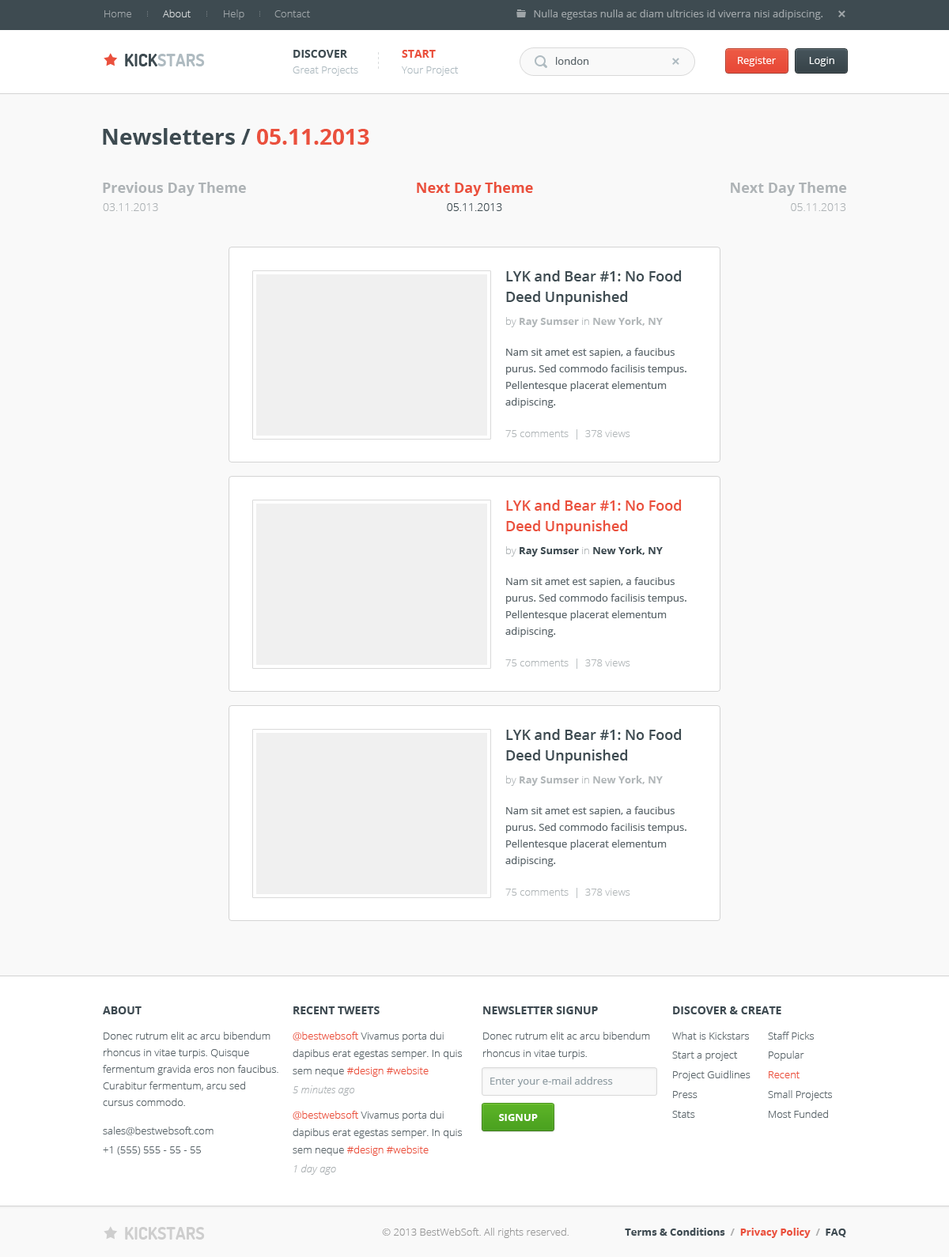
<style>
.page{position:relative;width:949px;height:1257px;background:#f9f9f9}
.page>*{position:absolute;margin:0}
.t1{font:10.3px "OpenSans-Light";color:#9fa5a8}
.t2{font:10.3px "OpenSans-Light";color:#d8dbdc}
.t3{font:10.3px "OpenSans";color:#9fa5a8}
.t4{font:17.4px "Dosis-Bold";color:#afbbc1;text-transform:uppercase}
.t5{font:17.4px "Dosis-Bold";color:#3e4b51;text-transform:uppercase}
.t6{font:11.1px "OpenSans-Bold";color:#3e4b51;text-transform:uppercase}
.t7{font:11.1px "OpenSans-Bold";color:#ea503d;text-transform:uppercase}
.t8{font:10.3px "OpenSans";color:#5c666b}
.t9{font:10.3px "OpenSans";color:#ffffff}
.t10{font:10.3px "OpenSans-Light";color:#afbbc1}
.t11{font:22.1px "OpenSans-Bold";color:#3e4b51}
.t12{font:22.1px "OpenSans-Bold";color:#ea503d}
.t13{font:14.2px "OpenSans-Bold";color:#aeb3b6}
.t14{font:14.2px "OpenSans-Bold";color:#ea503d}
.t15{font:11.1px "OpenSans-Light";color:#aeb3b6}
.t16{font:11.1px "OpenSans-Light";color:#3e4b51}
.t17{font:14.2px/20.6px "OpenSans-Semibold";color:#3e4b51}
.t18{font:10.3px "OpenSans-Bold";color:#b2b7b9}
.t19{font:10.3px "OpenSans-Light";color:#b2b7b9}
.t20{font:10.3px/16.6px "OpenSans";color:#5c666b}
.t21{font:14.2px/20.6px "OpenSans-Semibold";color:#ea503d}
.t22{font:10.3px "OpenSans-Bold";color:#3e4b51}
.t23{font:11.1px "OpenSans-Bold";color:#3e4a51;text-transform:uppercase}
.t24{font:10.3px/16.6px "OpenSans-Light";color:#5c666b}
.t25{font:10.3px/17.4px "OpenSans-Light";color:#5c666b}
.t26{font:10.3px/17.4px "OpenSans-Light";color:#ea503d}
.t27{font:10.3px "OpenSans-Light";color:#5c666b}
.t28{font:10.3px "OpenSans-Light";color:#ea503d}
.t29{font:10.3px "OpenSansLight-Italic";color:#adb2b5}
.t30{font:10.3px "OpenSans";color:#909da3}
.t31{font:10.3px "OpenSans-Bold";color:#ffffff;text-transform:uppercase}
.t32{font:17.4px "Dosis-Bold";color:#cecece;text-transform:uppercase}
.t33{font:10.3px "OpenSans-Light";color:#999999}
.t34{font:10.3px "OpenSans-Bold";color:#3e4a51}
.t35{font:10.3px "OpenSans-Bold";color:#aeaeae}
.t36{font:10.3px "OpenSans-Bold";color:#ea503d}
</style>
<div class="page">
<p class="t1" style="left:104px;top:10px;width:27px;height:7px">Home</p>
<p class="t2" style="left:163px;top:9px;width:28px;height:8px">About</p>
<p class="t1" style="left:224px;top:9px;width:20px;height:11px">Help</p>
<p class="t1" style="left:274px;top:10px;width:36px;height:7px">Contact</p>
<p class="t3" style="left:534px;top:9px;width:289px;height:11px">Nulla egestas nulla ac diam ultricies id viverra nisi adipiscing.</p>
<p class="t4" style="left:125px;top:54px;width:80px;height:12px"><span class="t5">Kick</span>stars</p>
<p class="t6" style="left:293px;top:50px;width:54px;height:8px">Discover</p>
<p class="t7" style="left:402px;top:50px;width:34px;height:8px">Start</p>
<p class="t8" style="left:556px;top:57px;width:33px;height:8px">london</p>
<p class="t9" style="left:738px;top:57px;width:38px;height:9px">Register</p>
<p class="t9" style="left:809px;top:57px;width:25px;height:9px">Login</p>
<p class="t10" style="left:293px;top:66px;width:65px;height:10px">Great Projects</p>
<p class="t10" style="left:402px;top:66px;width:57px;height:10px">Your Project</p>
<p class="t11" style="left:103px;top:128px;width:266px;height:17px">Newsletters / <span class="t12">05.11.2013</span></p>
<p class="t13" style="left:103px;top:182px;width:143px;height:14px">Previous Day Theme</p>
<p class="t14" style="left:417px;top:182px;width:116px;height:14px">Next Day Theme</p>
<p class="t13" style="left:730px;top:182px;width:117px;height:14px">Next Day Theme</p>
<p class="t15" style="left:103px;top:203px;width:55px;height:8px">03.11.2013</p>
<p class="t16" style="left:447px;top:203px;width:55px;height:8px">05.11.2013</p>
<p class="t15" style="left:791px;top:203px;width:55px;height:8px">05.11.2013</p>
<p class="t17" style="left:506px;top:270px;width:175px;height:35px">LYK and Bear #1: No Food Deed Unpunished</p>
<p class="t18" style="left:506px;top:317px;width:156px;height:10px"><span class="t19">by </span>Ray Sumser<span class="t19"> in </span>New York, NY</p>
<p class="t20" style="left:505px;top:348px;width:181px;height:60px">Nam sit amet est sapien, a faucibus purus. Sed commodo facilisis tempus. Pellentesque placerat elementum adipiscing.</p>
<p class="t19" style="left:505px;top:429px;width:125px;height:11px">75 comments  |  378 views</p>
<p class="t21" style="left:506px;top:500px;width:175px;height:34px">LYK and Bear #1: No Food Deed Unpunished</p>
<p class="t22" style="left:506px;top:546px;width:156px;height:11px"><span class="t19">by </span>Ray Sumser<span class="t19"> in </span>New York, NY</p>
<p class="t20" style="left:505px;top:577px;width:181px;height:60px">Nam sit amet est sapien, a faucibus purus. Sed commodo facilisis tempus. Pellentesque placerat elementum adipiscing.</p>
<p class="t19" style="left:505px;top:659px;width:125px;height:10px">75 comments  |  378 views</p>
<p class="t17" style="left:506px;top:729px;width:175px;height:35px">LYK and Bear #1: No Food Deed Unpunished</p>
<p class="t18" style="left:506px;top:776px;width:156px;height:10px"><span class="t19">by </span>Ray Sumser<span class="t19"> in </span>New York, NY</p>
<p class="t20" style="left:505px;top:806px;width:181px;height:60px">Nam sit amet est sapien, a faucibus purus. Sed commodo facilisis tempus. Pellentesque placerat elementum adipiscing.</p>
<p class="t19" style="left:505px;top:888px;width:125px;height:10px">75 comments  |  378 views</p>
<p class="t23" style="left:103px;top:1006px;width:39px;height:8px">About</p>
<p class="t23" style="left:293px;top:1006px;width:86px;height:8px">Recent Tweets</p>
<p class="t23" style="left:483px;top:1006px;width:115px;height:8px">Newsletter Signup</p>
<p class="t23" style="left:673px;top:1006px;width:108px;height:8px">Discover &amp; Create</p>
<p class="t24" style="left:103px;top:1032px;width:175px;height:74px">Donec rutrum elit ac arcu bibendum rhoncus in vitae turpis. Quisque fermentum gravida eros non faucibus. Curabitur fermentum, arcu sed cursus commodo.</p>
<p class="t25" style="left:293px;top:1032px;width:169px;height:45px"><span class="t26">@bestwebsoft</span> Vivamus porta dui dapibus erat egestas semper. In quis sem neque <span class="t26">#design #website</span></p>
<p class="t25" style="left:483px;top:1032px;width:167px;height:27px">Donec rutrum elit ac arcu bibendum rhoncus in vitae turpis.</p>
<p class="t27" style="left:672px;top:1032px;width:77px;height:8px">What is Kickstars</p>
<p class="t27" style="left:768px;top:1032px;width:45px;height:8px">Staff Picks</p>
<p class="t27" style="left:672px;top:1051px;width:66px;height:10px">Start a project</p>
<p class="t27" style="left:768px;top:1051px;width:36px;height:10px">Popular</p>
<p class="t27" style="left:673px;top:1070px;width:77px;height:11px">Project Guidlines</p>
<p class="t28" style="left:768px;top:1071px;width:31px;height:7px">Recent</p>
<p class="t29" style="left:293px;top:1085px;width:62px;height:11px">5 minutes ago</p>
<p class="t30" style="left:490px;top:1077px;width:123px;height:10px">Enter your e-mail address</p>
<p class="t27" style="left:673px;top:1091px;width:24px;height:7px">Press</p>
<p class="t27" style="left:768px;top:1090px;width:64px;height:10px">Small Projects</p>
<p class="t27" style="left:768px;top:1110px;width:60px;height:8px">Most Funded</p>
<p class="t25" style="left:293px;top:1111px;width:169px;height:45px"><span class="t26">@bestwebsoft </span>Vivamus porta dui dapibus erat egestas semper. In quis sem neque <span class="t26">#design #website</span></p>
<p class="t31" style="left:499px;top:1114px;width:39px;height:7px">Signup</p>
<p class="t27" style="left:672px;top:1111px;width:23px;height:7px">Stats</p>
<p class="t27" style="left:103px;top:1127px;width:110px;height:8px">sales@bestwebsoft.com</p>
<p class="t27" style="left:103px;top:1146px;width:98px;height:9px">+1 (555) 555 - 55 - 55</p>
<p class="t29" style="left:294px;top:1164px;width:42px;height:11px">1 day ago</p>
<p class="t32" style="left:125px;top:1227px;width:80px;height:13px">Kickstars</p>
<p class="t33" style="left:382px;top:1228px;width:186px;height:10px">© 2013 BestWebSoft. All rights reserved.</p>
<p class="t34" style="left:625px;top:1228px;width:221px;height:10px">Terms &amp; Conditions <span class="t35"> /  </span><span class="t36">Privacy Policy  </span><span class="t35">/  </span>FAQ</p>
</div>
